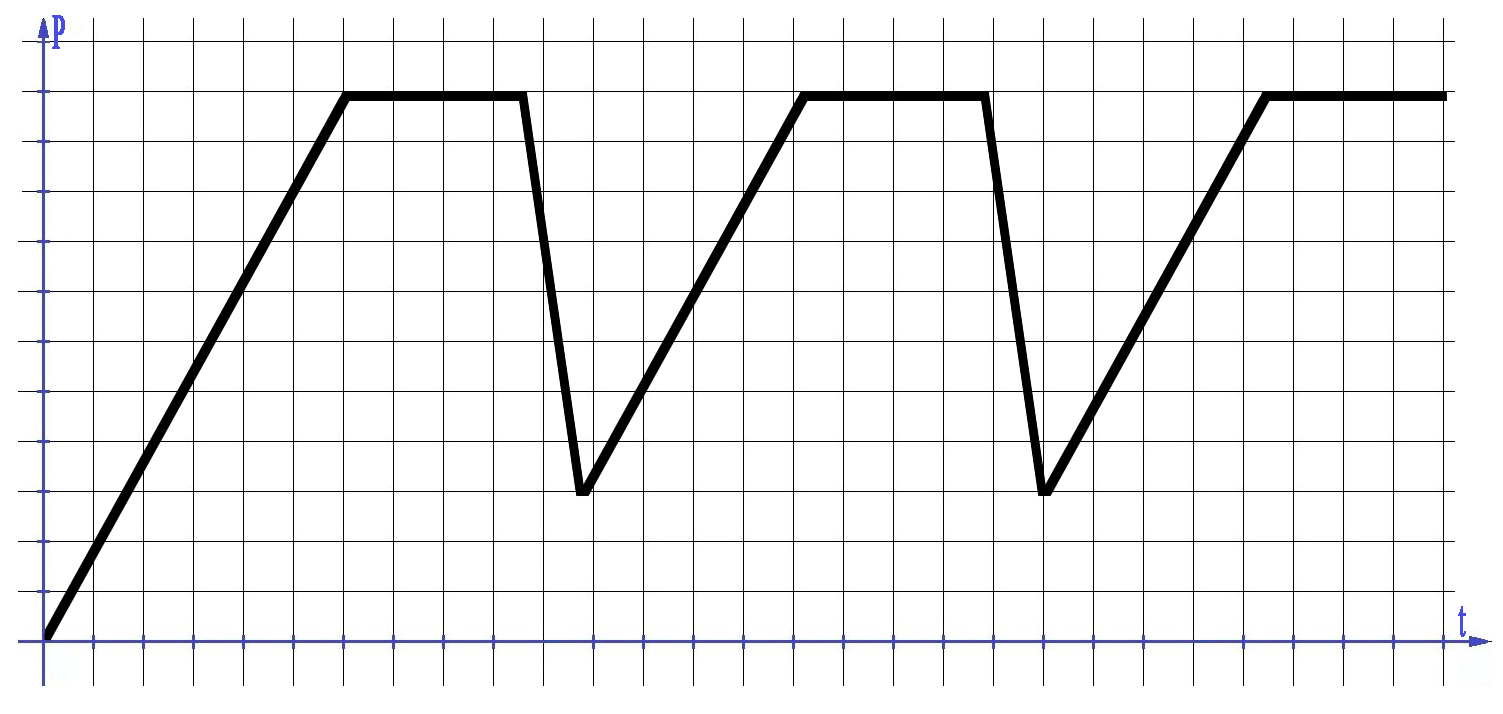
<style>
.page{position:relative;width:1503px;height:714px;background:#ffffff}
.page>*{position:absolute;margin:0}
.t1{font:49.6px "TimesNewRomanPSMT";letter-spacing:0.02em;color:#484ce1;font-weight:bold;scale:0.5 1}
</style>
<div class="page">
<p class="t1" style="left:52px;top:15px;width:13px;height:34px">P</p>
<p class="t1" style="left:1458px;top:606px;width:8px;height:31px">t</p>
</div>
